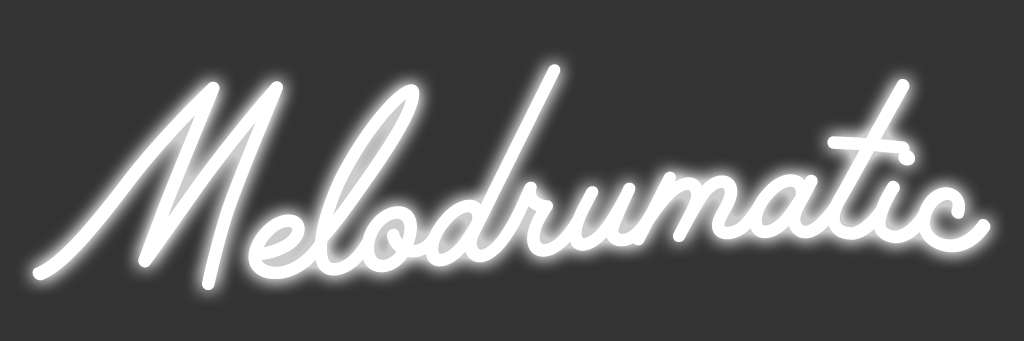
<style>
.page{position:relative;width:1024px;height:341px;background:#333333}
.page>*{position:absolute;margin:0}
.t1{font:245.5px "PalmCanyonDrive-Trial";color:#ffffff}
</style>
<div class="page">
<p class="t1" style="left:32px;top:64px;width:959px;height:226px">Melodrumatic</p>
</div>
